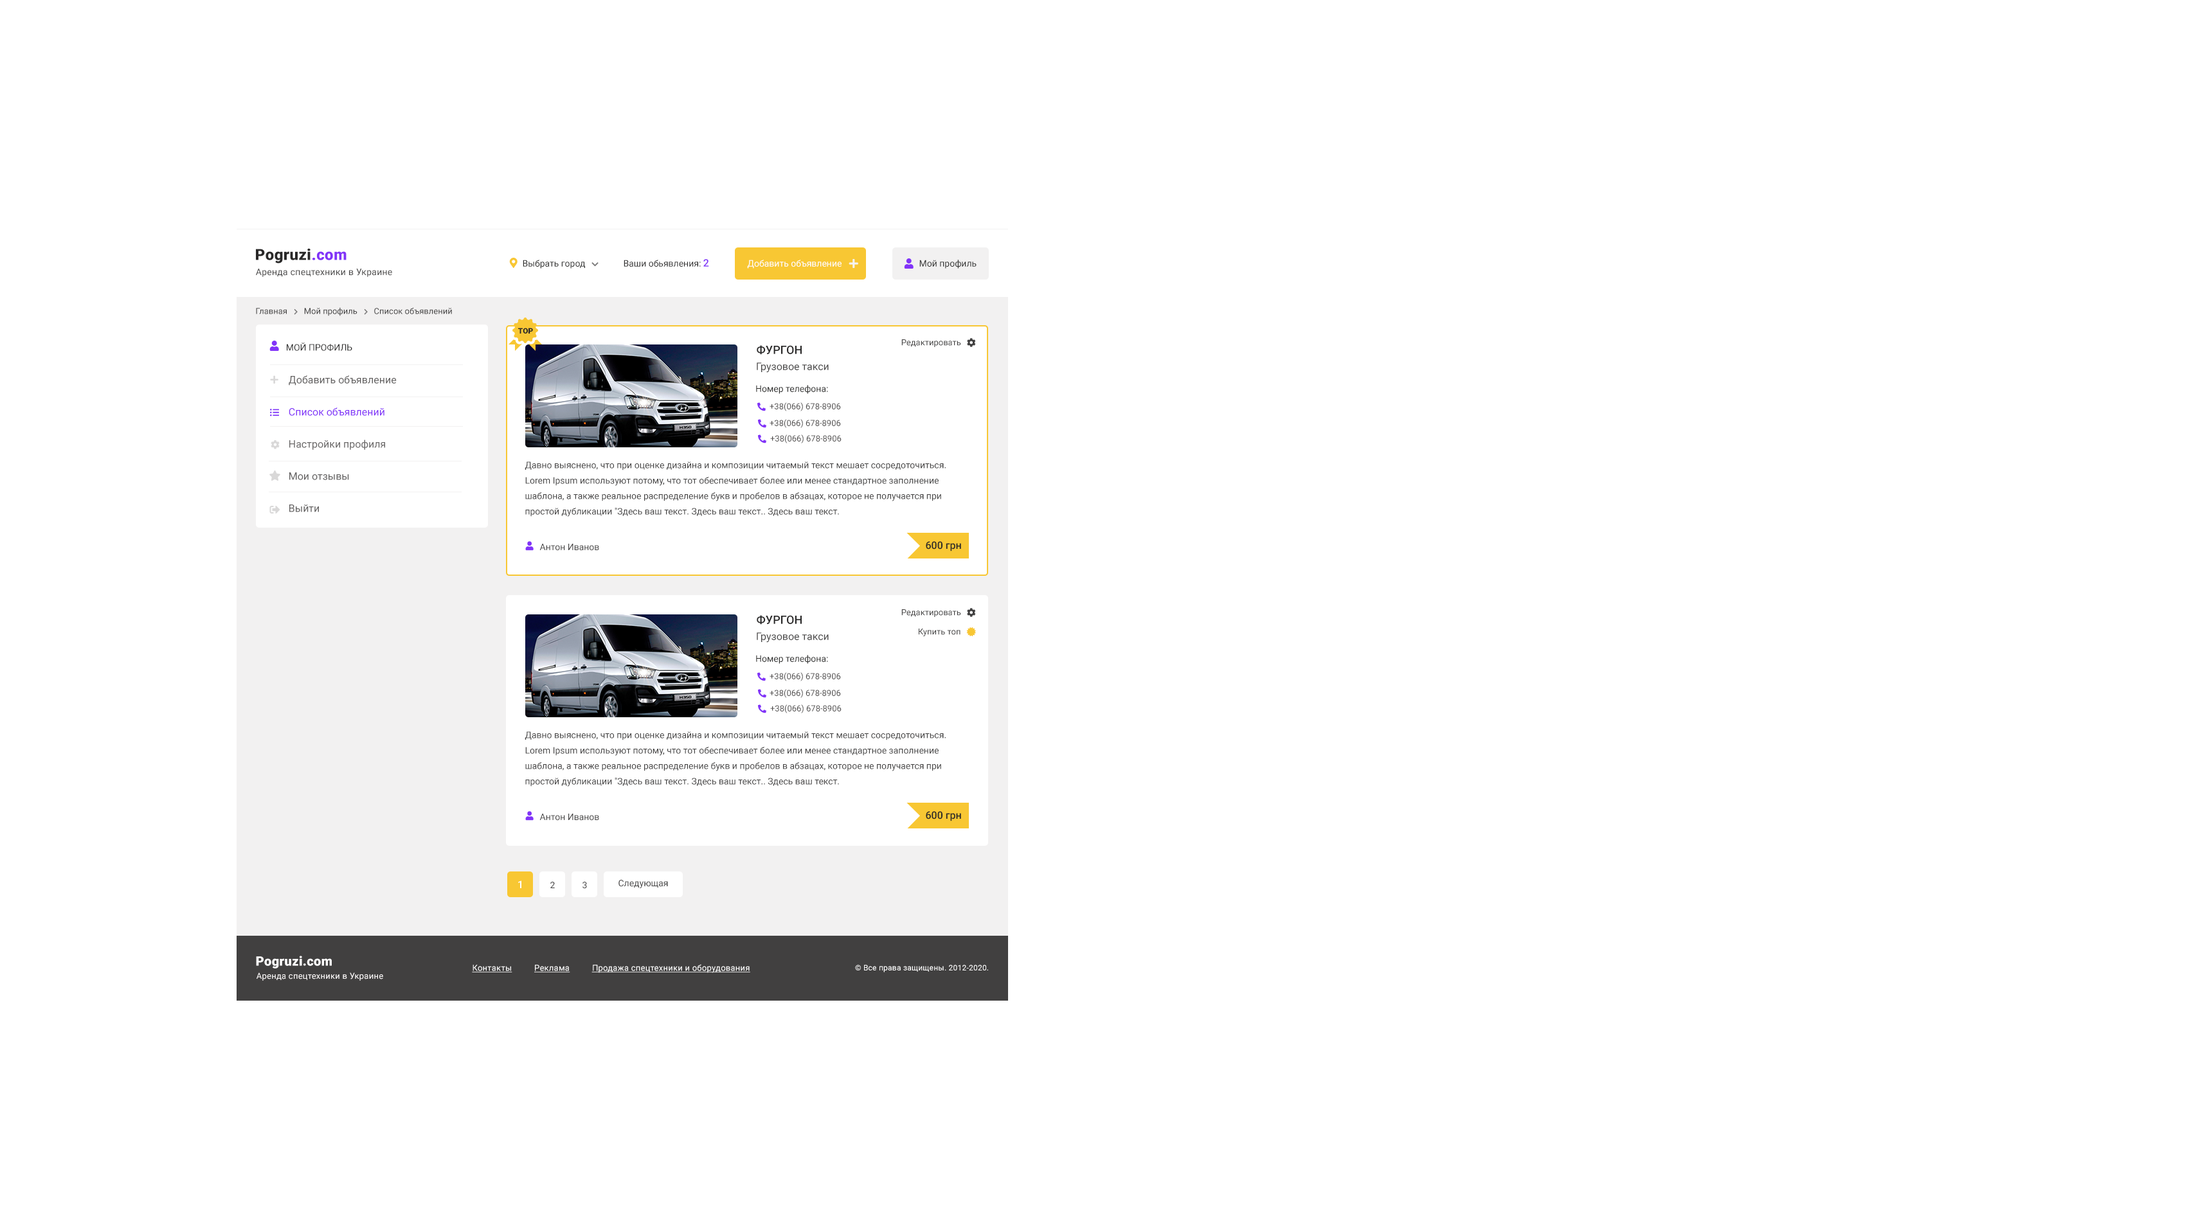
<style>
.page{position:relative;width:2191px;height:1223px;background:#ffffff}
.page>*{position:absolute;margin:0}
.t1{font:15.4px "Roboto-Black";letter-spacing:0.02em;color:#292828}
.t2{font:15.4px "Roboto-Black";letter-spacing:0.02em;color:#8233f8}
.t3{font:9px "Roboto-Regular";letter-spacing:0.02em;color:#414040}
.t4{font:9px "Roboto-Regular";color:#2a2a29}
.t5{font:9px "Roboto-Regular";color:#2b2a2a}
.t6{font:10.3px "Roboto-Medium";color:#8233f8}
.t7{font:9px "Roboto-Regular";color:#ffffff}
.t8{font:8.4px "Roboto-Regular";color:#414040}
.t9{font:7.7px "Roboto-Black";color:#292828;text-transform:uppercase}
.t10{font:9px "Roboto-Regular";color:#292828;text-transform:uppercase}
.t11{font:11.6px "Roboto-Medium";color:#292828;text-transform:uppercase}
.t12{font:10.3px "Roboto-Regular";color:#494848}
.t13{font:10.3px/32.1px "Roboto-Regular";color:#615f5f}
.t14{font:10.3px/32.1px "Roboto-Regular";color:#8233f8}
.t15{font:10.3px/32.1px "Roboto-Regular";color:#676666}
.t16{font:8.4px "Roboto-Regular";color:#4f4d4d}
.t17{font:9px/15.4px "Roboto-Regular";color:#403f3f}
.t18{font:9px "Roboto-Regular";color:#414040}
.t19{font:10.3px "Roboto-Medium";color:#292828}
.t20{font:10.3px "Roboto-Medium";color:#ffffff}
.t21{font:12.9px "Roboto-Black";letter-spacing:0.02em;color:#ffffff}
.t22{font:8.4px "Roboto-Regular";letter-spacing:0.02em;color:#ffffff;text-decoration:underline}
.t23{font:7.7px "Roboto-Regular";letter-spacing:0.02em;color:#ffffff}
.t24{font:8.4px "Roboto-Regular";letter-spacing:0.02em;color:#fdfafa}
</style>
<div class="page">
<p class="t1" style="left:256px;top:248px;width:90px;height:16px">Pogruzi<span class="t2">.com</span></p>
<p class="t3" style="left:256px;top:269px;width:136px;height:8px">Аренда спецтехники в Украине</p>
<p class="t4" style="left:523px;top:260px;width:62px;height:9px">Выбрать город</p>
<p class="t5" style="left:624px;top:259px;width:85px;height:8px">Ваши обьявления: <span class="t6">2</span></p>
<p class="t7" style="left:747px;top:260px;width:95px;height:9px">Добавить объявление</p>
<p class="t4" style="left:919px;top:260px;width:58px;height:9px">Мой профиль</p>
<p class="t8" style="left:256px;top:307px;width:196px;height:9px">Главная        Мой профиль        Список объявлений</p>
<p class="t9" style="left:518px;top:328px;width:15px;height:6px">Top</p>
<p class="t8" style="left:901px;top:339px;width:60px;height:8px">Редактировать</p>
<p class="t10" style="left:287px;top:343px;width:65px;height:8px">Мой профиль</p>
<p class="t11" style="left:757px;top:345px;width:45px;height:10px">Фургон</p>
<p class="t12" style="left:757px;top:363px;width:72px;height:10px">Грузовое такси</p>
<p class="t13" style="left:289px;top:375px;width:108px;height:137px">Добавить объявление<br><span class="t14">Список объявлений<br></span><span class="t15">Настройки профиля<br></span>Мои отзывы<br>Выйти</p>
<p class="t4" style="left:756px;top:385px;width:72px;height:9px">Номер телефона:</p>
<p class="t16" style="left:770px;top:402px;width:71px;height:9px">+38(066) 678-8906</p>
<p class="t16" style="left:770px;top:419px;width:71px;height:9px">+38(066) 678-8906</p>
<p class="t16" style="left:770px;top:435px;width:72px;height:9px">+38(066) 678-8906</p>
<p class="t17" style="left:525px;top:462px;width:421px;height:55px">Давно выяснено, что при оценке дизайна и композиции читаемый текст мешает сосредоточиться. Lorem Ipsum используют потому, что тот обеспечивает более или менее стандартное заполнение шаблона, а также реальное распределение букв и пробелов в абзацах, которое не получается при простой дубликации "Здесь ваш текст. Здесь ваш текст.. Здесь ваш текст.</p>
<p class="t18" style="left:539px;top:544px;width:60px;height:7px">Антон Иванов</p>
<p class="t19" style="left:926px;top:541px;width:35px;height:11px">600 грн</p>
<p class="t11" style="left:757px;top:615px;width:45px;height:10px">Фургон</p>
<p class="t8" style="left:901px;top:609px;width:60px;height:8px">Редактировать</p>
<p class="t8" style="left:919px;top:629px;width:41px;height:7px">Купить топ</p>
<p class="t12" style="left:757px;top:633px;width:72px;height:10px">Грузовое такси</p>
<p class="t4" style="left:756px;top:655px;width:72px;height:9px">Номер телефона:</p>
<p class="t16" style="left:770px;top:672px;width:71px;height:9px">+38(066) 678-8906</p>
<p class="t16" style="left:770px;top:689px;width:71px;height:9px">+38(066) 678-8906</p>
<p class="t16" style="left:770px;top:705px;width:72px;height:9px">+38(066) 678-8906</p>
<p class="t17" style="left:525px;top:732px;width:421px;height:55px">Давно выяснено, что при оценке дизайна и композиции читаемый текст мешает сосредоточиться. Lorem Ipsum используют потому, что тот обеспечивает более или менее стандартное заполнение шаблона, а также реальное распределение букв и пробелов в абзацах, которое не получается при простой дубликации "Здесь ваш текст. Здесь ваш текст.. Здесь ваш текст.</p>
<p class="t18" style="left:539px;top:814px;width:60px;height:7px">Антон Иванов</p>
<p class="t19" style="left:926px;top:811px;width:35px;height:11px">600 грн</p>
<p class="t20" style="left:518px;top:881px;width:3px;height:7px">1</p>
<p class="t18" style="left:618px;top:880px;width:50px;height:8px">Следующая</p>
<p class="t18" style="left:550px;top:882px;width:5px;height:6px">2</p>
<p class="t18" style="left:582px;top:882px;width:5px;height:7px">3</p>
<p class="t21" style="left:256px;top:956px;width:76px;height:13px">Pogruzi.com</p>
<p class="t22" style="left:472px;top:964px;width:278px;height:9px">Контакты          Реклама          Продажа спецтехники и оборудования</p>
<p class="t23" style="left:855px;top:965px;width:133px;height:8px">© Все права защищены. 2012-2020.</p>
<p class="t24" style="left:256px;top:973px;width:127px;height:8px">Аренда спецтехники в Украине</p>
</div>
